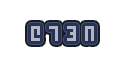
<style>
.page{position:relative;width:128px;height:64px;background:#ffffff}
.page>*{position:absolute;margin:0}
.t1{font:24px "Monooge0556";color:#b0b8bf}
</style>
<div class="page">
<p class="t1" style="left:31px;top:26px;width:63px;height:15px">@73N</p>
</div>
